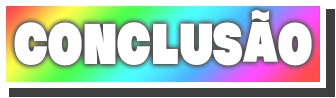
<style>
.page{position:relative;width:336px;height:98px;background:#ffffff}
.page>*{position:absolute;margin:0}
.t1{font:48px "RaglanPunchStd-UB";letter-spacing:0.002em;color:#ffffff;scale:0.81 1}
</style>
<div class="page">
<p class="t1" style="left:14px;top:10px;width:298px;height:56px">CONCLUSÃO</p>
</div>
